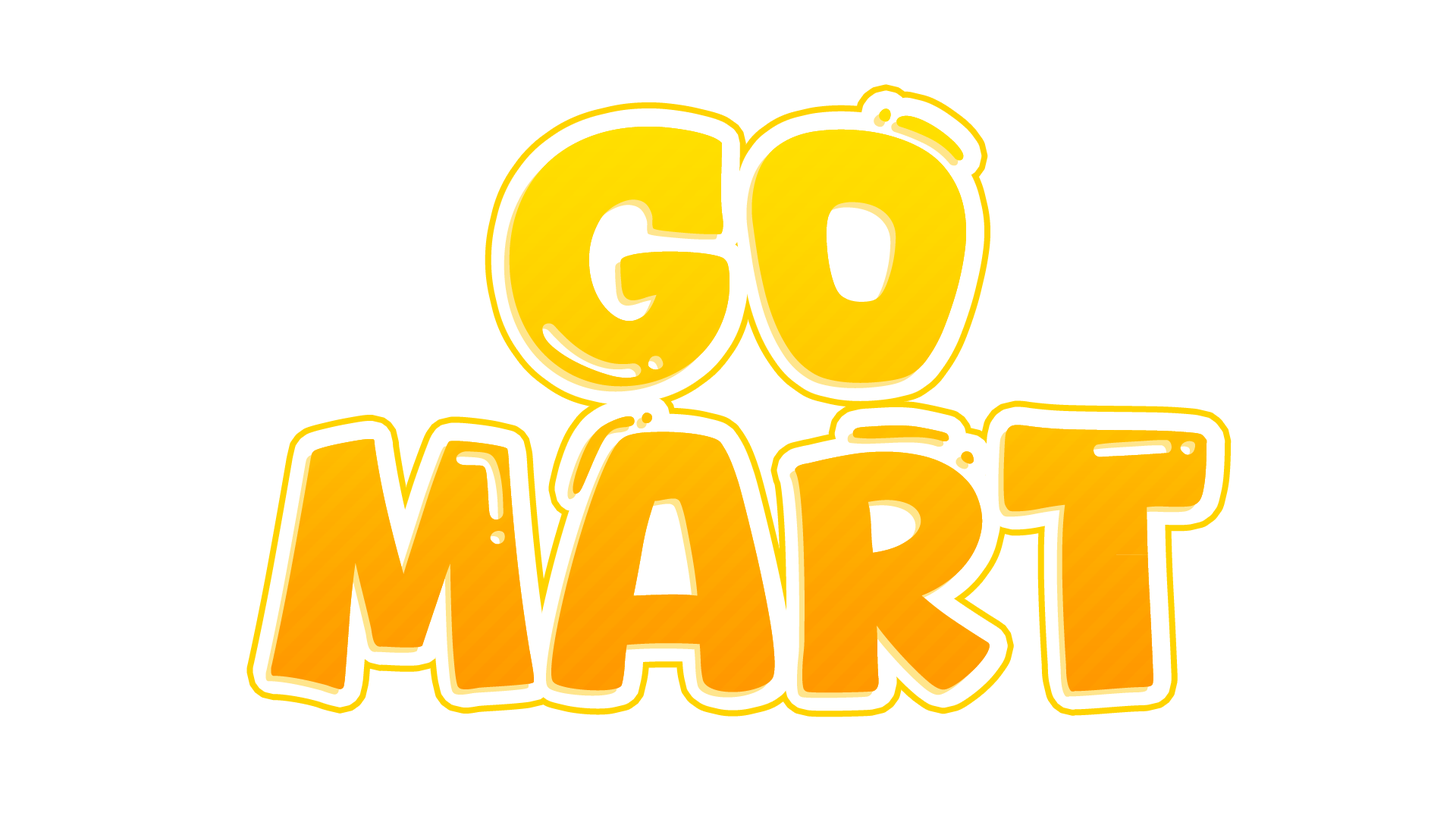
<style>
.page{position:relative;width:1456px;height:819px;background:#ffffff}
.page>*{position:absolute;margin:0}
.t1{font:344px/304.9px "Coffee-Soda"}
</style>
<div class="page">
<p class="t1" style="left:271px;top:108px;width:936px;height:585px;text-align:center">Go<br>Mart</p>
</div>
